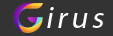
<style>
.page{position:relative;width:113px;height:36px;background:#333333}
.page>*{position:absolute;margin:0}
.t1{font:31px "MyriadPro-Regular";letter-spacing:0.12em;color:#ffffff;font-style:italic}
</style>
<div class="page">
<p class="t1" style="left:47px;top:7px;width:57px;height:21px">irus</p>
</div>
